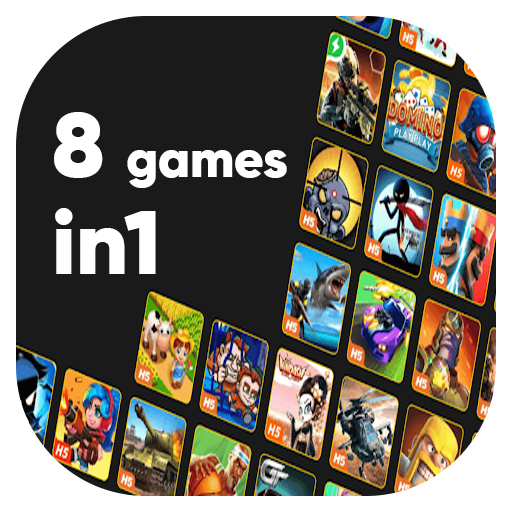
<style>
.page{position:relative;width:512px;height:512px;background:#1a1a1a}
.page>*{position:absolute;margin:0}
.t1{font:52px/122px "Gilroy-Black";color:#ffffff}
.t2{font:92px/122px "Gilroy-Black";color:#ffffff}
.t3{font:115px/122px "Gilroy-Black";color:#ffffff}
.t4{font:90px/97px "Gilroy-Black";color:#ffffff}
</style>
<div class="page">
<p class="t1" style="left:54px;top:112px;width:233px;height:162px"><span class="t2">8 </span>games<span class="t3"> <br></span><span class="t4">in1</span></p>
</div>
